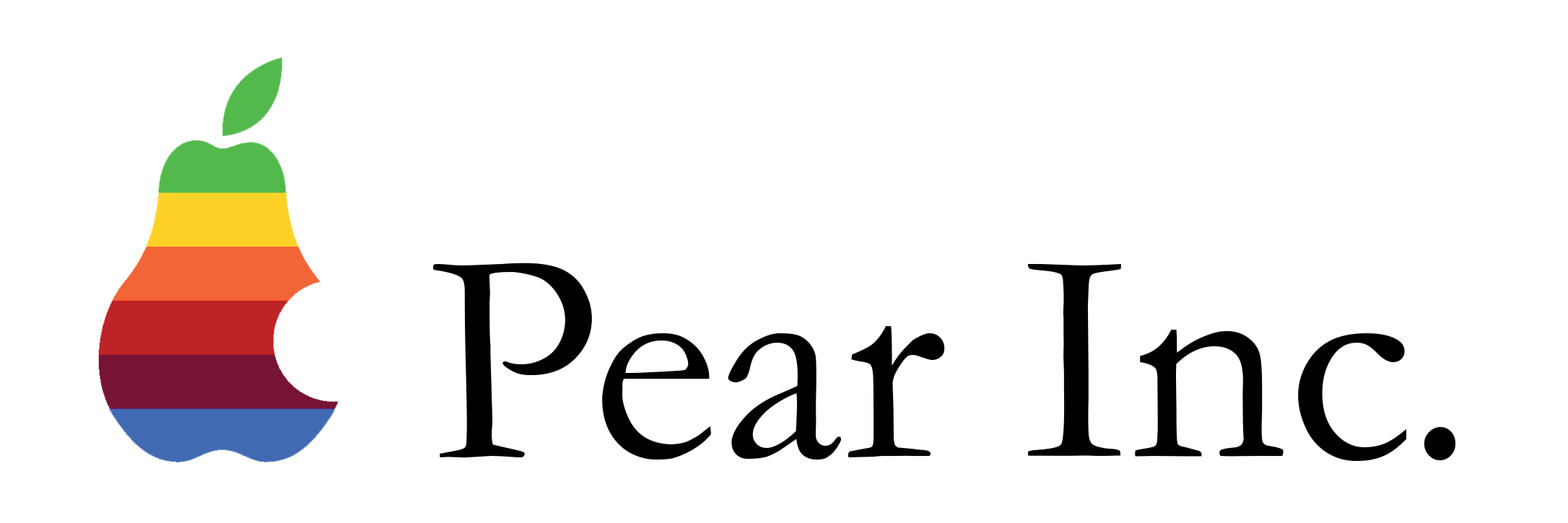
<style>
.page{position:relative;width:1568px;height:523px;background:#ffffff}
.page>*{position:absolute;margin:0}
.t1{font:306.6px "Garamond";color:#000000}
</style>
<div class="page">
<p class="t1" style="left:432px;top:263px;width:1024px;height:198px">Pear Inc.</p>
</div>
